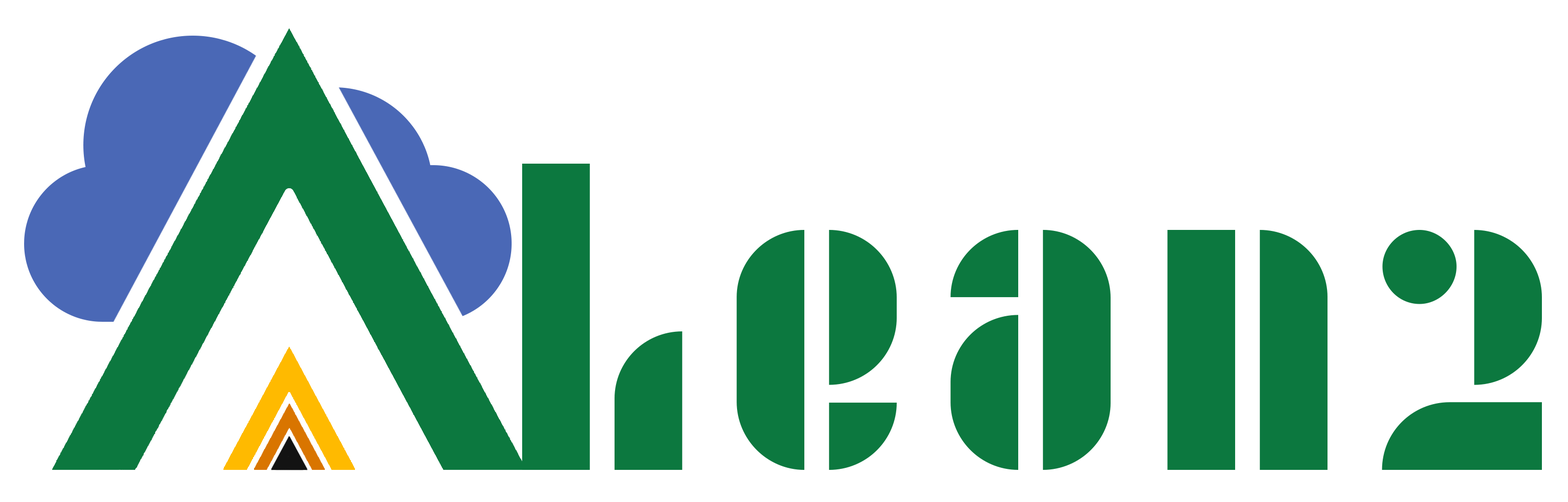
<style>
.page{position:relative;width:1568px;height:502px;background:#ffffff}
.page>*{position:absolute;margin:0}
.t1{font:457.3px "Joschmi";letter-spacing:0.055em;color:#0c783f}
</style>
<div class="page">
<p class="t1" style="left:522px;top:164px;width:1020px;height:306px">Lean2</p>
</div>
